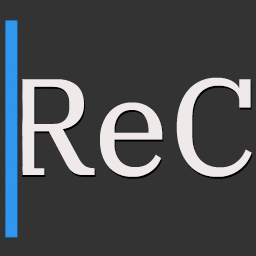
<style>
.page{position:relative;width:256px;height:256px;background:#333333}
.page>*{position:absolute;margin:0}
.t1{font:137px "IBMPlexSerif-Text";color:#f0e9e9}
</style>
<div class="page">
<p class="t1" style="left:10px;top:77px;width:242px;height:100px">ReC</p>
</div>
